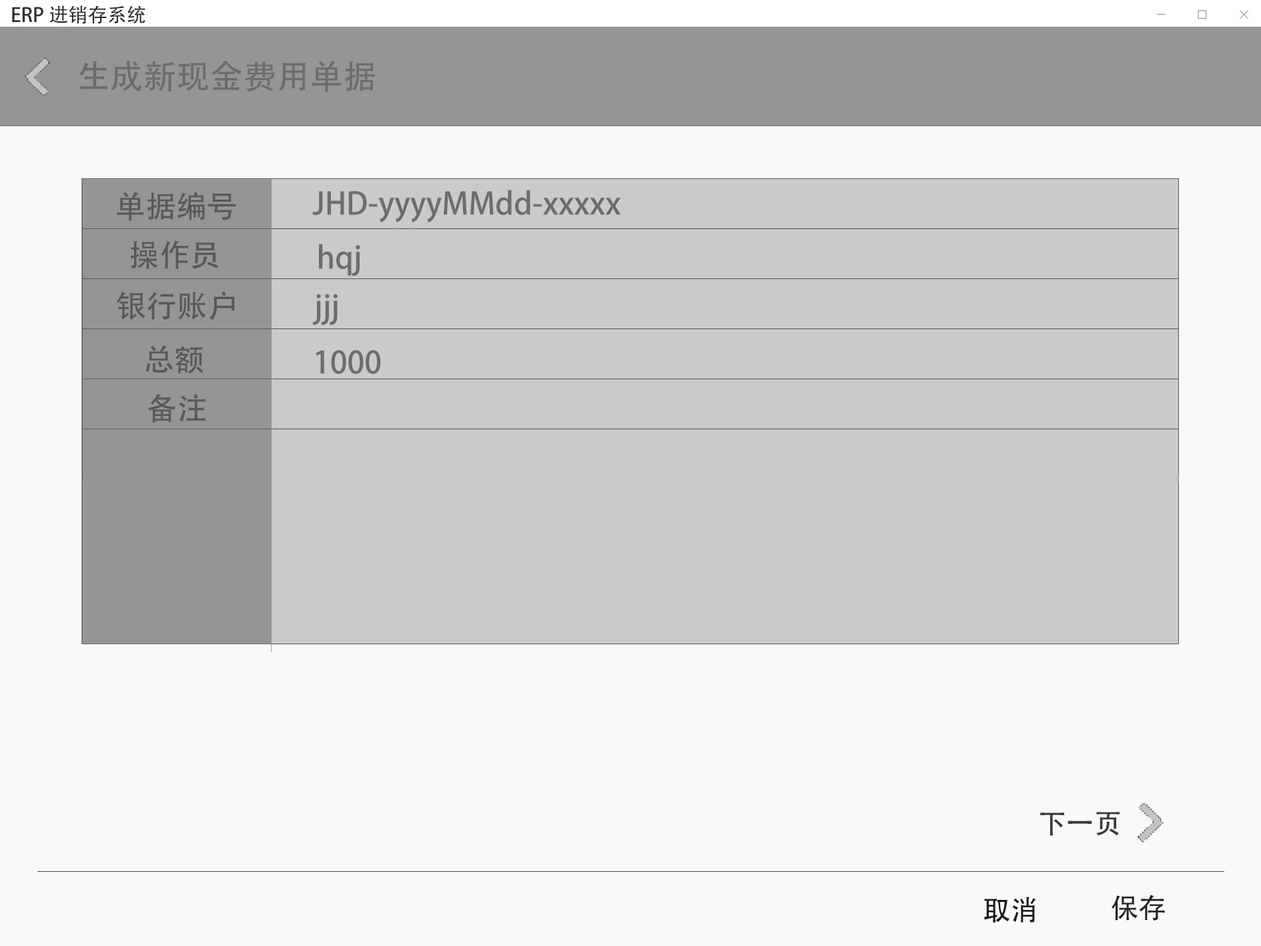
<style>
.page{position:relative;width:1261px;height:946px;background:#f9f9f9}
.page>*{position:absolute;margin:0}
.t1{font:19.5px "AdobeHeitiStd-Regular";color:#2e2e2e}
.t2{font:33.4px "AdobeHeitiStd-Regular";color:#6c6c6c}
.t3{font:30.6px "AdobeHeitiStd-Regular";color:#585859}
.t4{font:30.6px "AdobeHeitiStd-Regular";color:#6c6d6d}
.t5{font:27.8px "AdobeHeitiStd-Regular";color:#3a3839}
.t6{font:27.8px "AdobeHeitiStd-Regular";color:#1b1a1a}
.t7{font:27.8px "AdobeHeitiStd-Regular";color:#242323}
</style>
<div class="page">
<p class="t1" style="left:12px;top:5px;width:133px;height:19px">ERP进销存系统</p>
<p class="t2" style="left:79px;top:60px;width:296px;height:32px">生成新现金费用单据</p>
<p class="t3" style="left:117px;top:192px;width:119px;height:29px">单据编号</p>
<p class="t4" style="left:312px;top:190px;width:309px;height:32px">JHD-yyyyMMdd-xxxxx</p>
<p class="t3" style="left:130px;top:240px;width:89px;height:29px">操作员</p>
<p class="t4" style="left:319px;top:244px;width:41px;height:32px">hqj</p>
<p class="t3" style="left:117px;top:291px;width:118px;height:29px">银行账户</p>
<p class="t4" style="left:312px;top:294px;width:26px;height:31px">jjj</p>
<p class="t3" style="left:145px;top:345px;width:59px;height:29px">总额</p>
<p class="t4" style="left:316px;top:350px;width:65px;height:24px">1000</p>
<p class="t3" style="left:147px;top:394px;width:59px;height:28px">备注</p>
<p class="t5" style="left:1040px;top:811px;width:80px;height:24px">下一页</p>
<p class="t6" style="left:984px;top:896px;width:52px;height:26px">取消</p>
<p class="t7" style="left:1112px;top:894px;width:53px;height:26px">保存</p>
</div>
